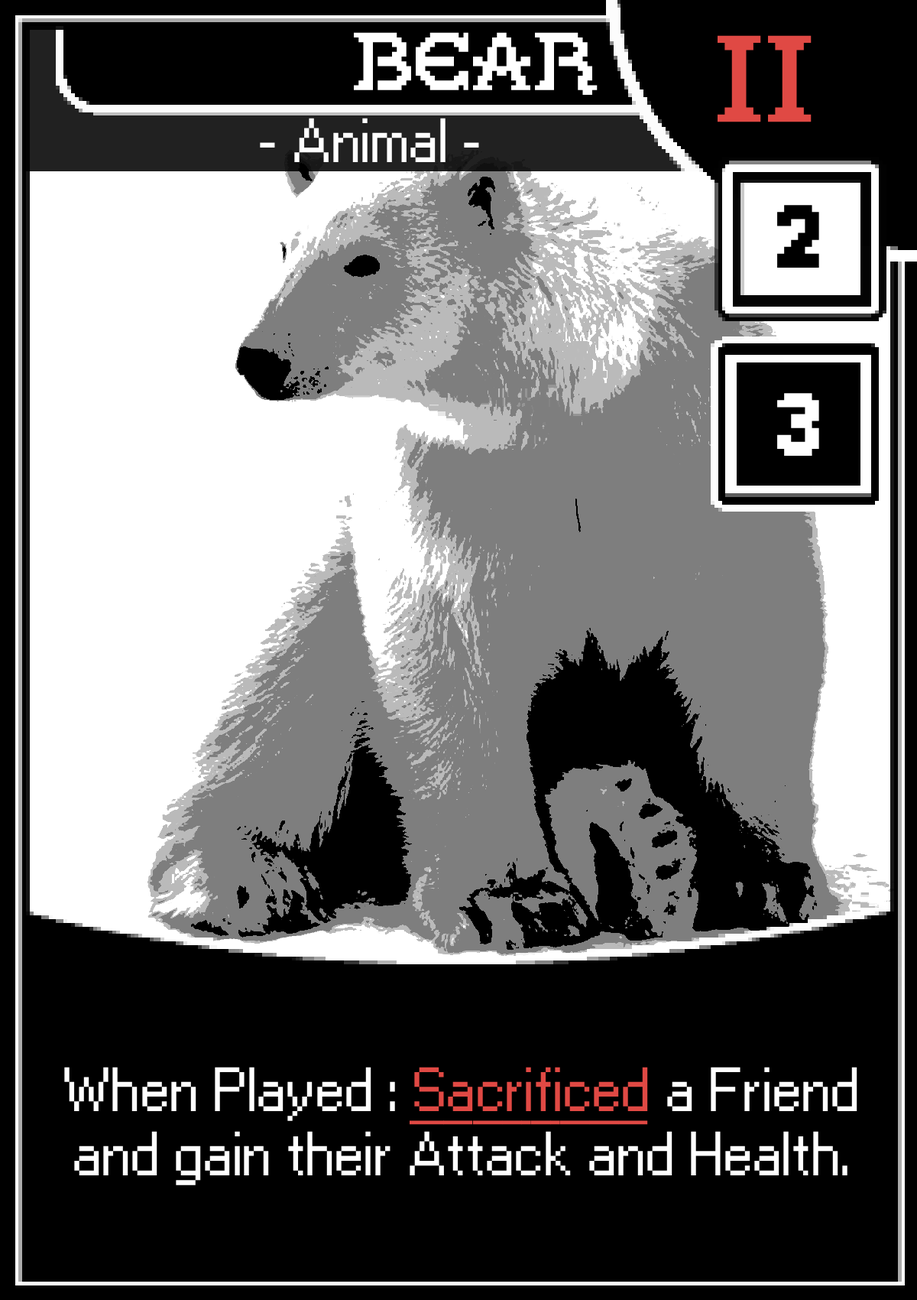
<style>
.page{position:relative;width:917px;height:1300px;background:#000000}
.page>*{position:absolute;margin:0}
.t1{font:76.5px "GallaeciaForte";color:#ffffff}
.t2{font:114.7px "GallaeciaForte";color:#e04944}
.t3{font:53.5px "Ari-W9500-Regular";color:#ffffff}
.t4{font:76.5px "AriW9500-Condensed-Display";color:#000000}
.t5{font:76.5px "AriW9500-Condensed-Display";color:#ffffff}
.t6{font:53.5px "Ari-W9500-Regular";color:#e04944;text-decoration:underline}
</style>
<div class="page">
<p class="t1" style="left:354px;top:32px;width:244px;height:63px">BEAR</p>
<p class="t2" style="left:718px;top:35px;width:94px;height:87px">II</p>
<p class="t3" style="left:260px;top:118px;width:219px;height:44px">- Animal -</p>
<p class="t4" style="left:778px;top:205px;width:42px;height:63px">2</p>
<p class="t5" style="left:778px;top:393px;width:42px;height:63px">3</p>
<p class="t3" style="left:64px;top:1067px;width:794px;height:118px;text-align:center">When Played : <span class="t6">Sacrificed </span>a Friend and gain their Attack and Health.</p>
</div>
